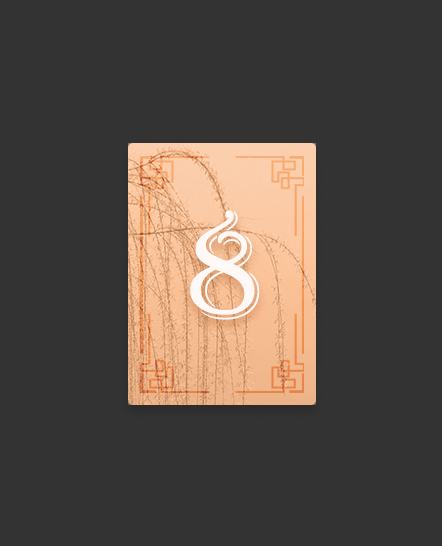
<style>
.page{position:relative;width:442px;height:546px;background:#333333}
.page>*{position:absolute;margin:0}
.t1{font:129.2px "Algerian";letter-spacing:0.1em;color:#fef8f7;text-transform:uppercase}
</style>
<div class="page">
<p class="t1" style="left:190px;top:210px;width:70px;height:110px">8</p>
</div>
